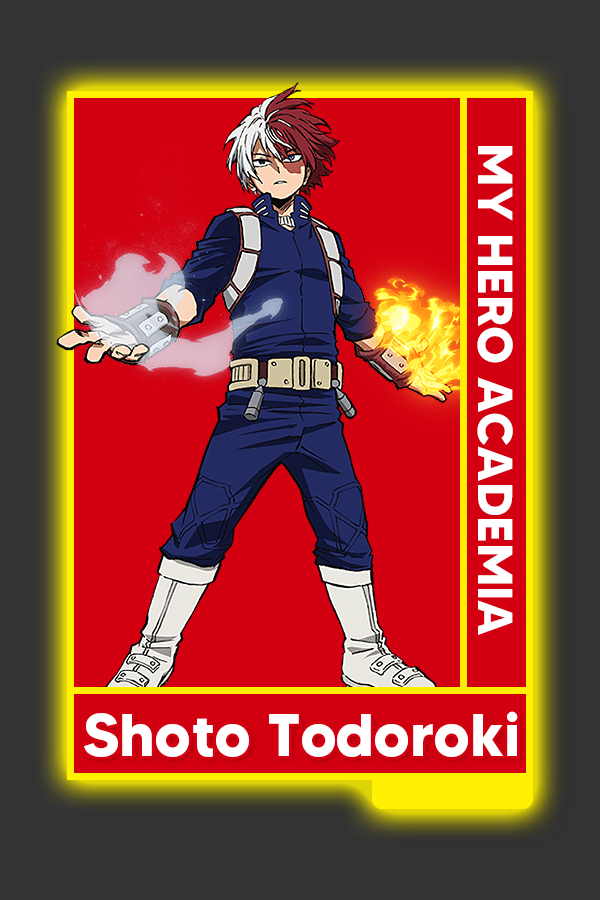
<style>
.page{position:relative;width:600px;height:900px;background:#d20010}
.page>*{position:absolute;margin:0}
.t1{font:48.8px "MADETOMMY-Bold";color:#ffffff}
.t2{font:60.3px "MADETOMMY-Bold";color:#ffffff}
</style>
<div class="page">
<p class="t1" style="left:477px;top:146px;width:36px;height:489px;rotate:90deg">MY HERO ACADEMIA</p>
<p class="t2" style="left:84px;top:711px;width:434px;height:46px">Shoto Todoroki</p>
</div>
